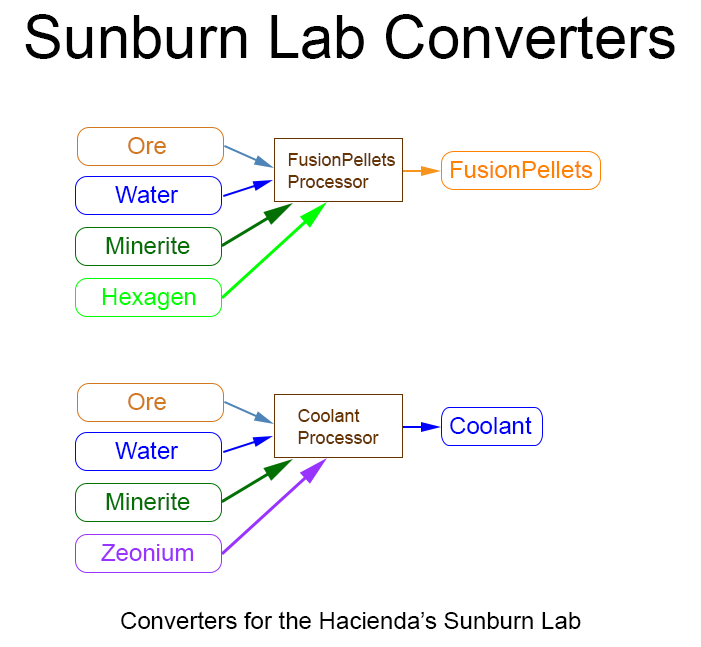
<style>
.page{position:relative;width:701px;height:647px;background:#ffffff}
.page>*{position:absolute;margin:0}
.t1{font:60px "ArialMT";color:#000000}
.t2{font:24px "ArialMT";color:#d2791f}
.t3{font:18px "ArialMT";color:#663401}
.t4{font:24px "ArialMT";color:#ff8100}
.t5{font:24px "ArialMT";color:#0000ff}
.t6{font:24px "ArialMT";color:#027002}
.t7{font:24px "ArialMT";color:#00ff00}
.t8{font:24px "ArialMT";color:#9933ff}
.t9{font:24px "ArialMT";color:#000000}
</style>
<div class="page">
<p class="t1" style="left:25px;top:14px;width:650px;height:45px">Sunburn Lab Converters</p>
<p class="t2" style="left:128px;top:137px;width:38px;height:17px">Ore</p>
<p class="t3" style="left:288px;top:153px;width:107px;height:35px">FusionPellets<br>Processor</p>
<p class="t4" style="left:451px;top:160px;width:142px;height:18px">FusionPellets</p>
<p class="t5" style="left:115px;top:185px;width:64px;height:18px">Water</p>
<p class="t6" style="left:106px;top:236px;width:84px;height:18px">Minerite</p>
<p class="t7" style="left:102px;top:288px;width:94px;height:22px">Hexagen</p>
<p class="t2" style="left:128px;top:393px;width:38px;height:17px">Ore</p>
<p class="t3" style="left:298px;top:409px;width:81px;height:35px">Coolant<br>Processor</p>
<p class="t5" style="left:450px;top:416px;width:82px;height:18px">Coolant</p>
<p class="t5" style="left:115px;top:441px;width:64px;height:18px">Water</p>
<p class="t6" style="left:106px;top:492px;width:84px;height:18px">Minerite</p>
<p class="t8" style="left:101px;top:544px;width:93px;height:17px">Zeonium</p>
<p class="t9" style="left:121px;top:611px;width:460px;height:18px">Converters for the Hacienda’s Sunburn Lab</p>
</div>
